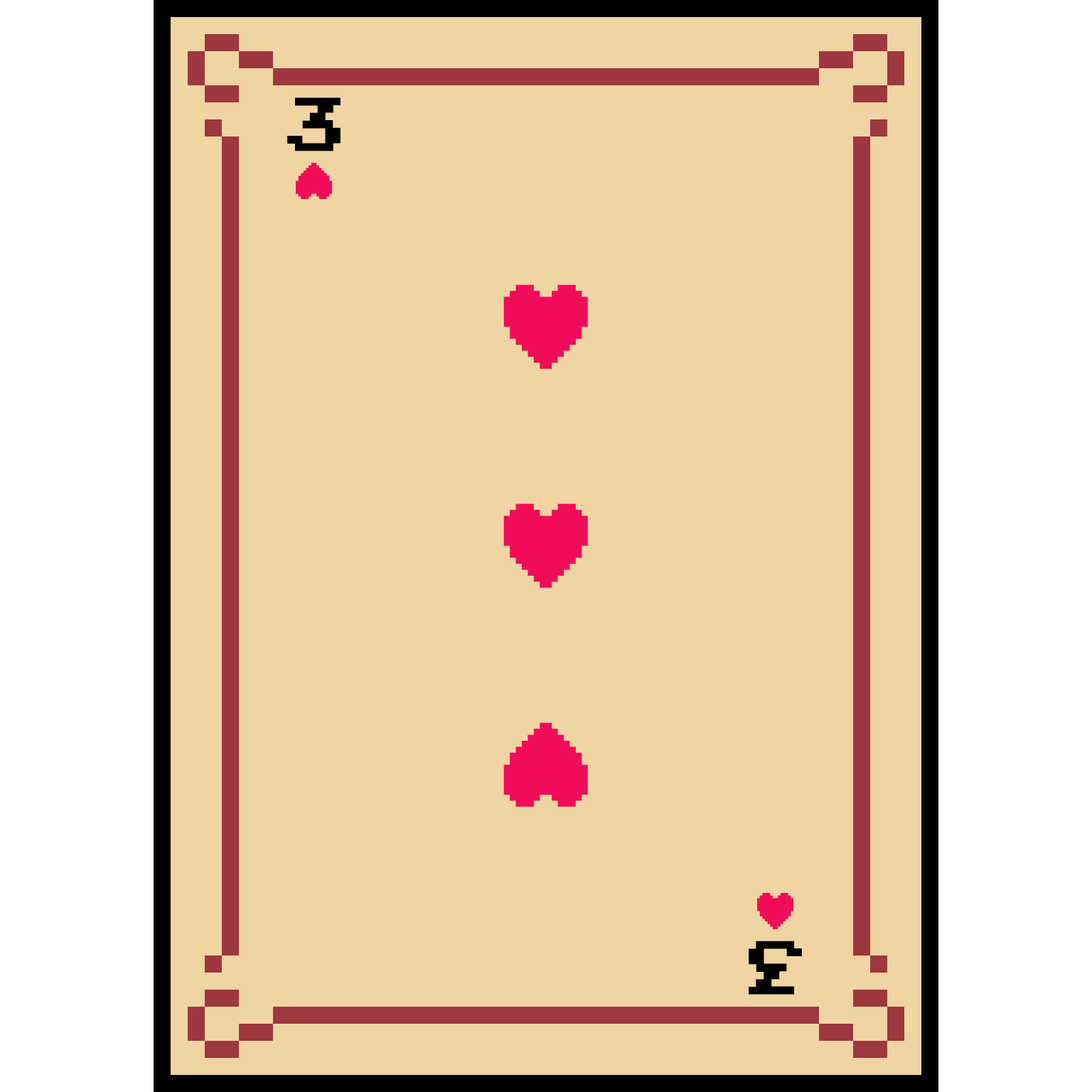
<style>
.page{position:relative;width:1092px;height:1092px;background:#f0d4a3}
.page>*{position:absolute;margin:0}
.t1{font:106.6px "ArcadeClassic";color:#000000}
</style>
<div class="page">
<p class="t1" style="left:287px;top:97px;width:54px;height:54px">3</p>
<p class="t1" style="left:749px;top:941px;width:53px;height:54px;rotate:180deg">3</p>
</div>
